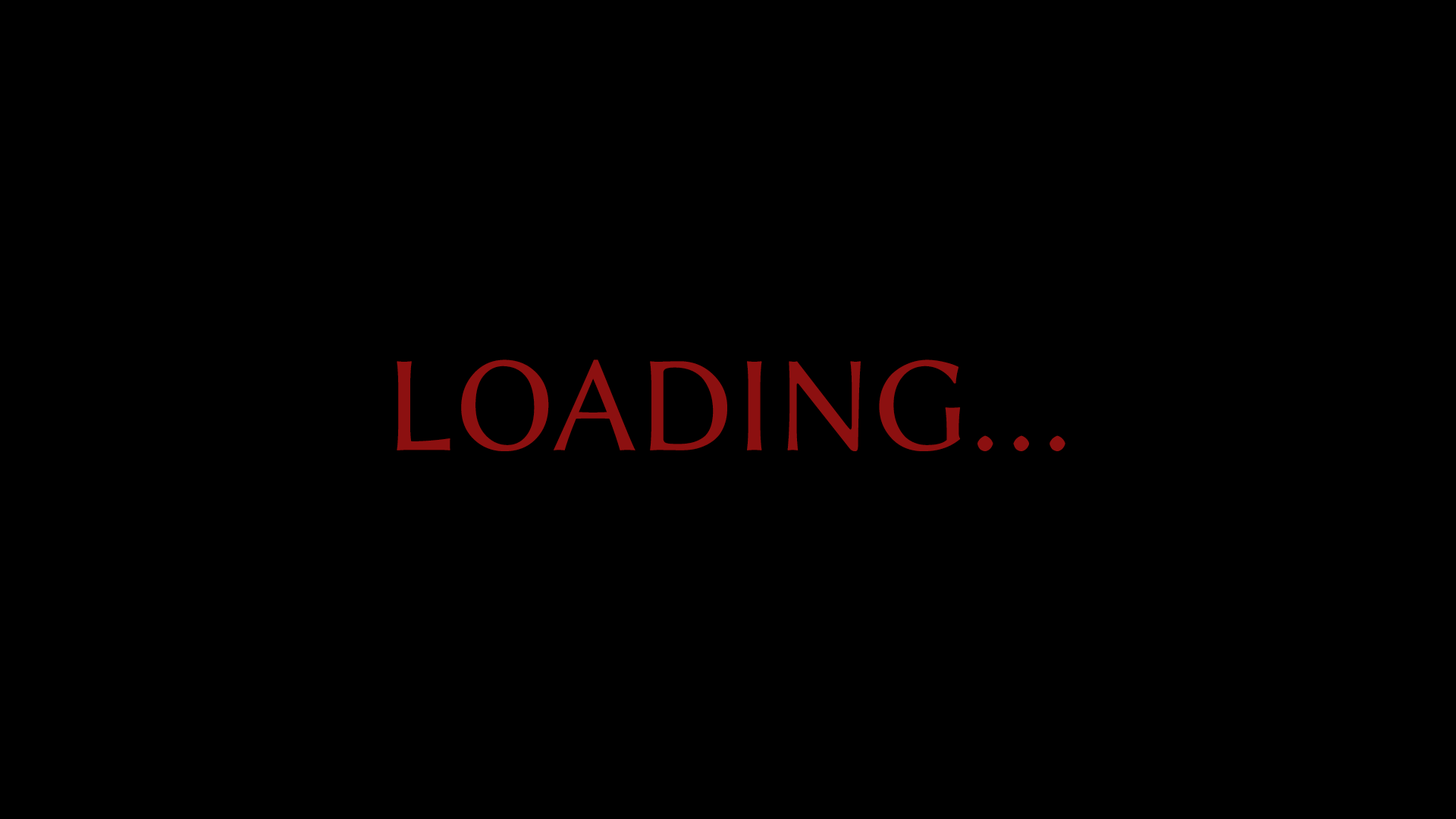
<style>
.page{position:relative;width:1456px;height:819px;background:#000000}
.page>*{position:absolute;margin:0}
.t1{font:136.5px "LinBiolinum";color:#8c1010}
</style>
<div class="page">
<p class="t1" style="left:397px;top:359px;width:668px;height:92px">LOADING...</p>
</div>
